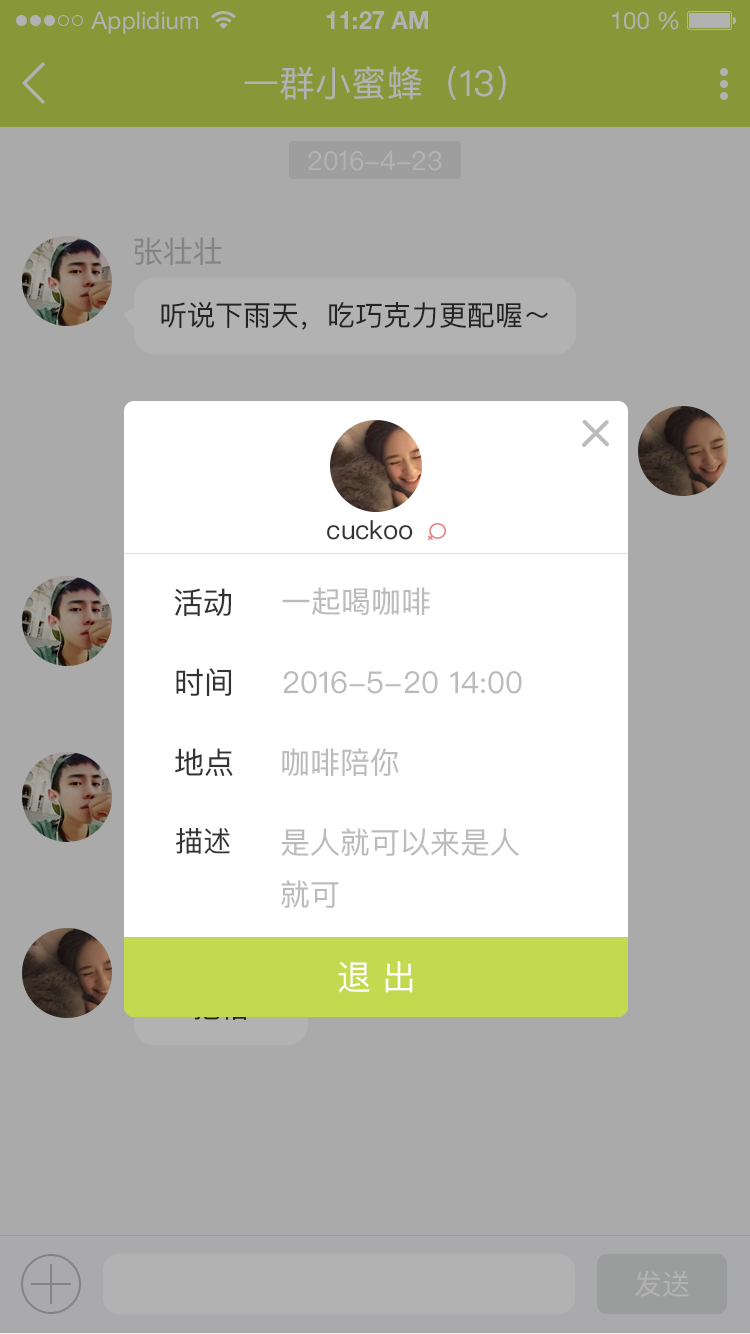
<style>
.page{position:relative;width:750px;height:1334px;background:#aaaaaa}
.page>*{position:absolute;margin:0}
.t1{font:24px "HelveticaNeueLTStd-Roman";color:#b2b2b2}
.t2{font:24px "HelveticaNeueLTStd-Bd";color:#b2b2b2}
.t3{font:36px "PingFangSC-Regular";color:#b2b2b2}
.t4{font:26px "PingFangSC-Regular";color:#b2b2b2}
.t5{font:30px "PingFangSC-Regular";color:#838383}
.t6{font:28px "PingFangSC-Regular";color:#333333}
.t7{font:26px "PingFangSC-Regular";color:#333333}
.t8{font:30px "PingFangSC-Regular";color:#333333}
.t9{font:30px "PingFangSC-Regular";color:#bbbbbb}
.t10{font:34px "PingFangSC-Regular";color:#ffffff}
.t11{font:28px "PingFangSC-Regular";color:#b2b2b2}
</style>
<div class="page">
<p class="t1" style="left:91px;top:11px;width:107px;height:23px">Applidium</p>
<p class="t2" style="left:326px;top:11px;width:102px;height:18px">11:27 AM</p>
<p class="t1" style="left:612px;top:11px;width:67px;height:19px">100 %</p>
<p class="t3" style="left:244px;top:66px;width:262px;height:34px">一群小蜜蜂（13）</p>
<p class="t4" style="left:308px;top:151px;width:134px;height:20px">2016-4-23</p>
<p class="t5" style="left:134px;top:237px;width:88px;height:28px">张壮壮</p>
<p class="t6" style="left:161px;top:301px;width:387px;height:29px">听说下雨天，吃巧克力更配喔～</p>
<p class="t7" style="left:327px;top:520px;width:86px;height:20px">cuckoo</p>
<p class="t8" style="left:174px;top:588px;width:57px;height:29px">活动</p>
<p class="t9" style="left:282px;top:587px;width:148px;height:29px">一起喝咖啡</p>
<p class="t8" style="left:176px;top:668px;width:56px;height:29px">时间</p>
<p class="t9" style="left:283px;top:671px;width:239px;height:23px">2016-5-20 14:00</p>
<p class="t8" style="left:175px;top:748px;width:58px;height:28px">地点</p>
<p class="t9" style="left:282px;top:748px;width:117px;height:29px">咖啡陪你</p>
<p class="t6" style="left:176px;top:828px;width:54px;height:26px">描述</p>
<p class="t9" style="left:281px;top:828px;width:238px;height:80px">是人就可以来是人<br>就可</p>
<p class="t10" style="left:338px;top:961px;width:75px;height:32px">退 出</p>
<p class="t11" style="left:635px;top:1270px;width:54px;height:27px">发送</p>
</div>
